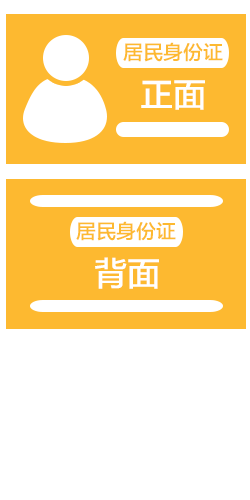
<style>
.page{position:relative;width:250px;height:500px;background:#ffffff}
.page>*{position:absolute;margin:0}
.t1{font:19.8px "FZLTZHK--GBK1-0";color:#fdb930}
.t2{font:33.3px "FZLTZHK--GBK1-0";color:#ffffff}
</style>
<div class="page">
<p class="t1" style="left:123px;top:42px;width:100px;height:20px">居民身份证</p>
<p class="t2" style="left:141px;top:80px;width:64px;height:30px">正面</p>
<p class="t1" style="left:76px;top:221px;width:100px;height:20px">居民身份证</p>
<p class="t2" style="left:95px;top:257px;width:64px;height:32px">背面</p>
</div>
